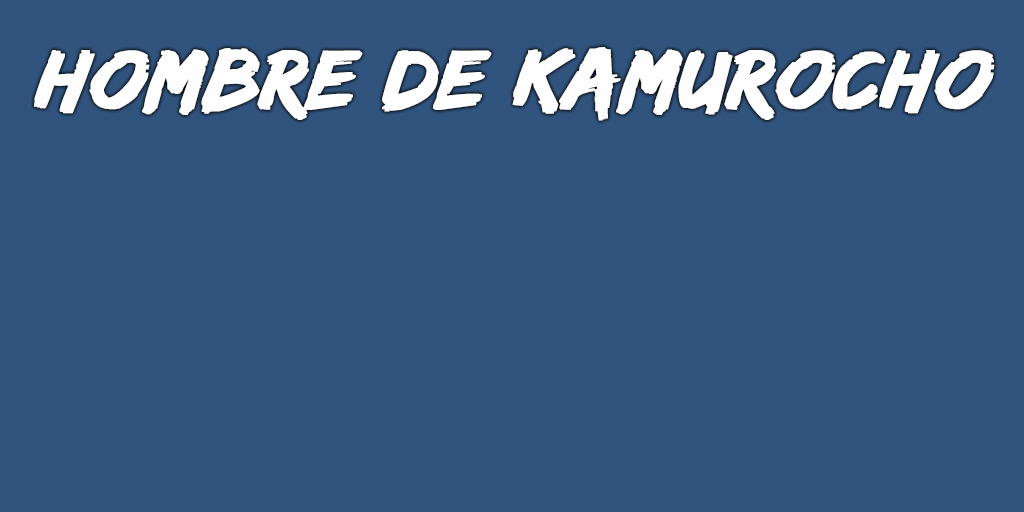
<style>
.page{position:relative;width:1024px;height:512px;background:#31547e}
.page>*{position:absolute;margin:0}
.t1{font:87px "EdoSZ";color:#fefefe;font-weight:bold;font-style:italic;scale:1.05 1}
</style>
<div class="page">
<p class="t1" style="left:34px;top:47px;width:961px;height:74px">hombre de kamurocho</p>
</div>
